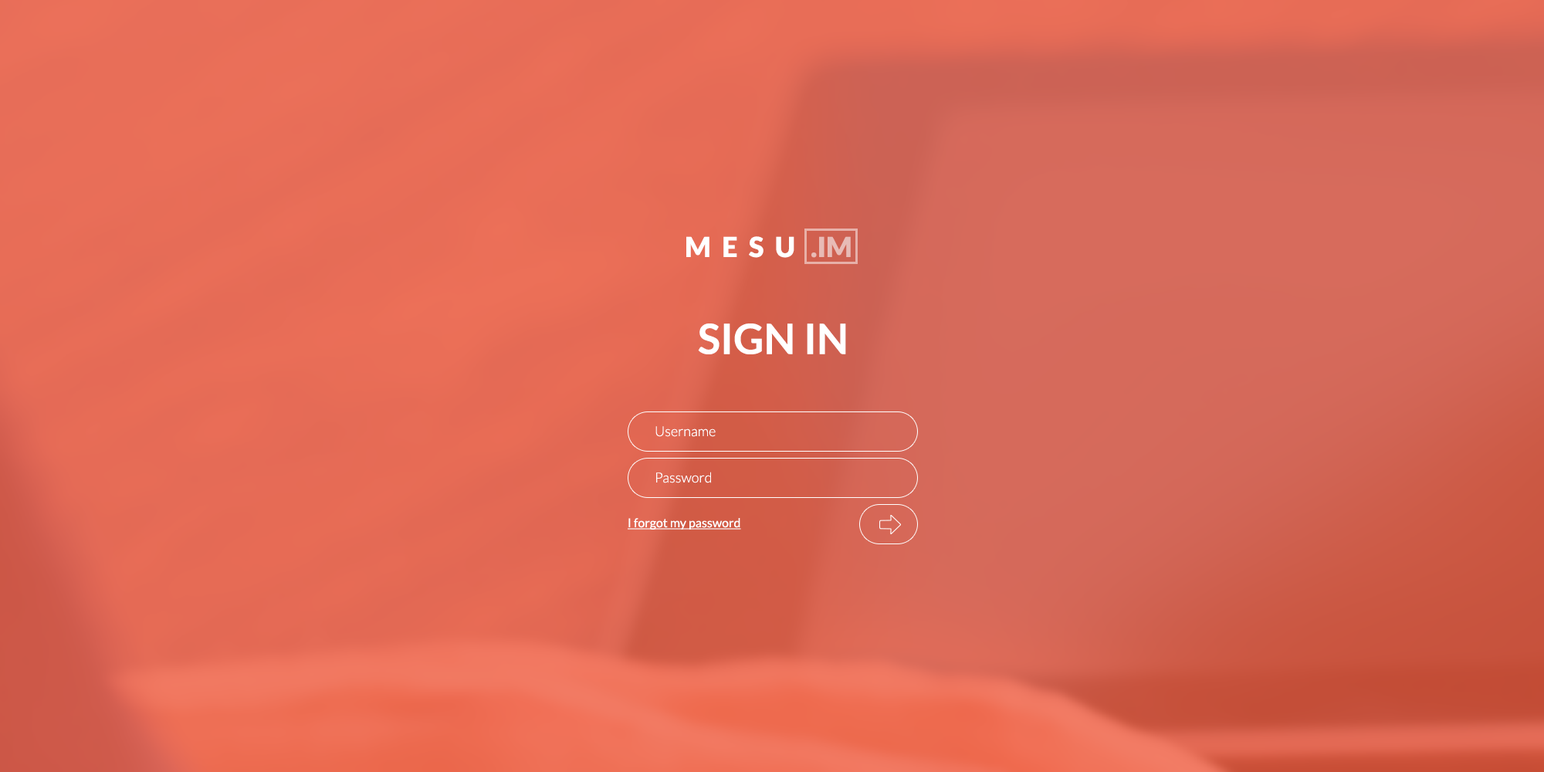
<style>
.page{position:relative;width:1544px;height:772px}
.page>*{position:absolute;margin:0}
.t1{font:27.8px "Lato-Black";letter-spacing:0.4em;color:#ffffff;text-transform:uppercase}
.t2{font:27.8px "Lato-Black";color:#e8bbb6;text-transform:uppercase}
.t3{font:41.7px "Lato-Bold";color:#ffffff;text-transform:uppercase}
.t4{font:13.9px "Lato-Light";color:#ffffff}
.t5{font:12.4px "Lato-Regular";color:#ffffff;text-decoration:underline}
</style>
<div class="page">
<p class="t1" style="left:686px;top:236px;width:109px;height:22px">mesu</p>
<p class="t2" style="left:812px;top:236px;width:39px;height:22px">.im</p>
<p class="t3" style="left:698px;top:324px;width:148px;height:30px">sign in</p>
<p class="t4" style="left:656px;top:426px;width:60px;height:11px">Username</p>
<p class="t4" style="left:656px;top:472px;width:55px;height:11px">Password</p>
<p class="t5" style="left:628px;top:518px;width:113px;height:12px">I forgot my password</p>
</div>
